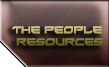
<style>
.page{position:relative;width:109px;height:67px}
.page>*{position:absolute;margin:0}
.t1{font:10px "Xirod-Regular";scale:0.96 1}
.t2{font:9.1px "Xirod-Regular";scale:0.96 1}
</style>
<div class="page">
<p class="t1" style="left:12px;top:26px;width:91px;height:20px"><span class="t2"> </span>THE PEOPLE<br>  RESOURCES</p>
</div>
